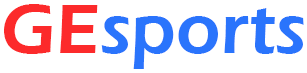
<style>
.page{position:relative;width:307px;height:73px;background:#ffffff}
.page>*{position:absolute;margin:0}
.t1{font:72px "ErasITC-Demi";color:#2a74fc}
.t2{font:72px "ErasITC-Demi";color:#fc2a2b}
</style>
<div class="page">
<p class="t1" style="left:4px;top:4px;width:300px;height:65px"><span class="t2">GE</span>sports</p>
</div>
